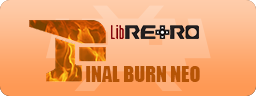
<style>
.page{position:relative;width:256px;height:96px}
.page>*{position:absolute;margin:0}
.t1{font:20px "Impact";color:#b65405}
</style>
<div class="page">
<p class="t1" style="left:86px;top:66px;width:114px;height:16px">INAL BURN NEO</p>
</div>
